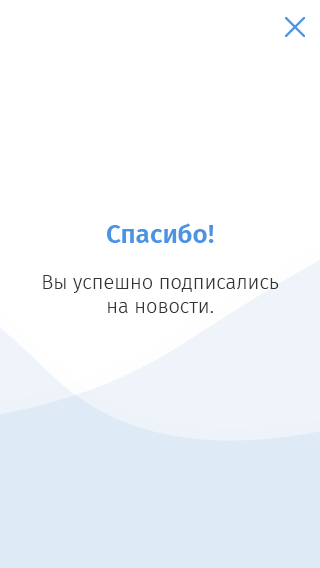
<style>
.page{position:relative;width:320px;height:568px;background:#ffffff}
.page>*{position:absolute;margin:0}
.t1{font:26px "FiraSans-SemiBold";color:#4a94e3}
.t2{font:20px/24px "FiraSans-Light";color:#343434}
</style>
<div class="page">
<p class="t1" style="left:107px;top:223px;width:107px;height:20px">Cпасибо!</p>
<p class="t2" style="left:43px;top:275px;width:236px;height:38px;text-align:center">Вы успешно подписались<br>на новости.</p>
</div>
